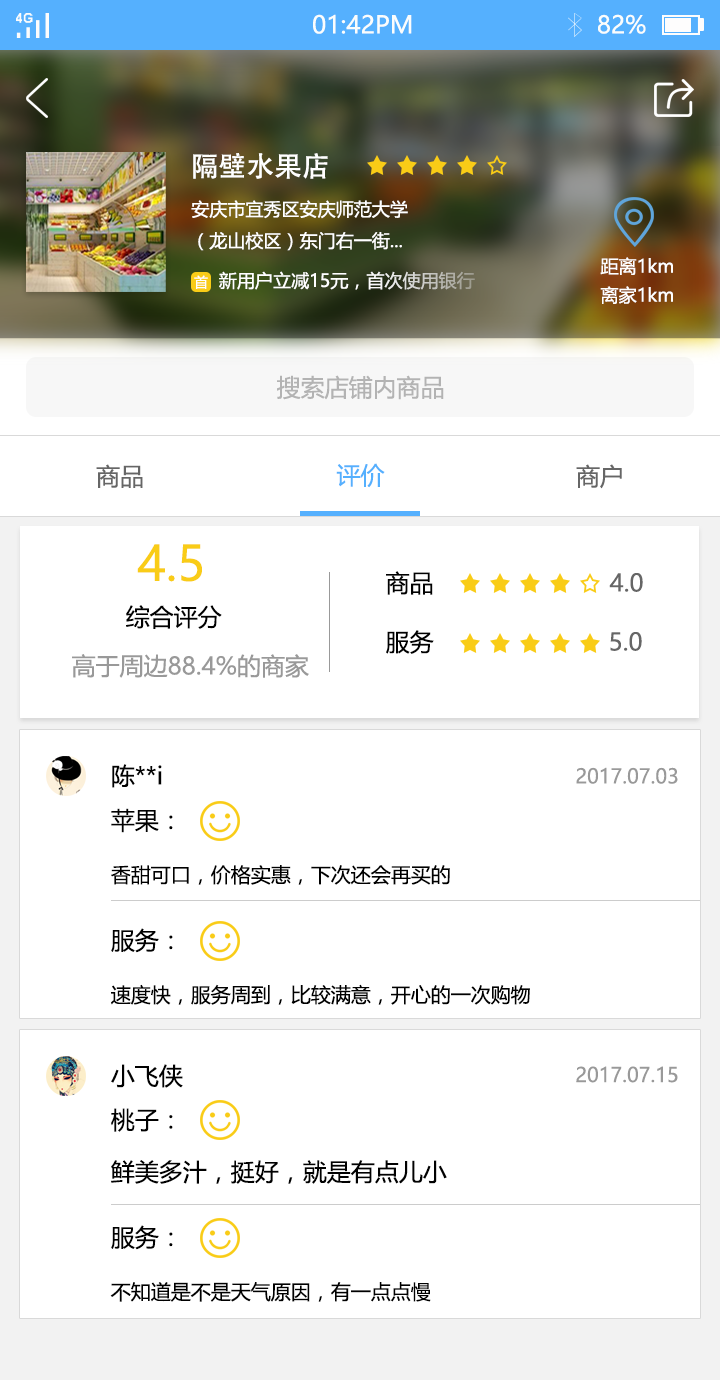
<style>
.page{position:relative;width:720px;height:1380px;background:#ffffff}
.page>*{position:absolute;margin:0}
.t1{font:24px "MicrosoftYaHei";color:#fbfdfc}
.t2{font:27.7px "AdobeHeitiStd-Regular";color:#ffffff}
.t3{font:18px "MicrosoftYaHei";color:#ffffff}
.t4{font:18.1px "MicrosoftYaHei";color:#ffffff}
.t5{font:13.8px "MicrosoftYaHei";color:#ffffff}
.t6{font:24px "MicrosoftYaHei";color:#b3b3b3}
.t7{font:24px "MicrosoftYaHei";color:#666666}
.t8{font:24px "MicrosoftYaHei";color:#55b0fe}
.t9{font:48px "MicrosoftYaHei";color:#f9cc17}
.t10{font:24px "MicrosoftYaHei";color:#010101}
.t11{font:24px "MicrosoftYaHei";color:#000000}
.t12{font:24px "MicrosoftYaHei";color:#999999}
.t13{font:20px "MicrosoftYaHei";color:#999999}
.t14{font:20px "MicrosoftYaHei";color:#000000}
</style>
<div class="page">
<p class="t1" style="left:313px;top:14px;width:99px;height:20px">01:42PM</p>
<p class="t1" style="left:598px;top:14px;width:48px;height:20px">82%</p>
<p class="t2" style="left:193px;top:153px;width:135px;height:26px">隔壁水果店</p>
<p class="t3" style="left:191px;top:200px;width:217px;height:51px">安庆市宜秀区安庆师范大学<br>（龙山校区）东门右一街...</p>
<p class="t4" style="left:600px;top:257px;width:73px;height:18px">距离1km</p>
<p class="t5" style="left:194px;top:275px;width:14px;height:14px">首</p>
<p class="t3" style="left:219px;top:271px;width:256px;height:19px">新用户立减15元，首次使用银行</p>
<p class="t4" style="left:600px;top:286px;width:73px;height:18px">离家1km</p>
<p class="t6" style="left:277px;top:375px;width:167px;height:25px">搜索店铺内商品</p>
<p class="t7" style="left:96px;top:464px;width:47px;height:24px">商品</p>
<p class="t8" style="left:336px;top:463px;width:49px;height:25px">评价</p>
<p class="t7" style="left:576px;top:464px;width:46px;height:25px">商户</p>
<p class="t9" style="left:137px;top:544px;width:65px;height:38px">4.5</p>
<p class="t10" style="left:386px;top:571px;width:47px;height:24px">商品</p>
<p class="t7" style="left:609px;top:573px;width:34px;height:19px">4.0</p>
<p class="t10" style="left:126px;top:605px;width:96px;height:24px">综合评分</p>
<p class="t11" style="left:386px;top:630px;width:48px;height:24px">服务</p>
<p class="t7" style="left:610px;top:632px;width:32px;height:19px">5.0</p>
<p class="t12" style="left:72px;top:654px;width:237px;height:24px">高于周边88.4%的商家</p>
<p class="t10" style="left:112px;top:764px;width:50px;height:24px">陈**i</p>
<p class="t13" style="left:576px;top:767px;width:102px;height:17px">2017.07.03</p>
<p class="t10" style="left:111px;top:808px;width:62px;height:25px">苹果：</p>
<p class="t14" style="left:111px;top:865px;width:339px;height:20px">香甜可口，价格实惠，下次还会再买的</p>
<p class="t10" style="left:111px;top:928px;width:62px;height:25px">服务：</p>
<p class="t14" style="left:111px;top:984px;width:419px;height:21px">速度快，服务周到，比较满意，开心的一次购物</p>
<p class="t10" style="left:111px;top:1064px;width:72px;height:24px">小飞侠</p>
<p class="t13" style="left:576px;top:1066px;width:102px;height:17px">2017.07.15</p>
<p class="t10" style="left:111px;top:1108px;width:62px;height:24px">桃子：</p>
<p class="t10" style="left:111px;top:1160px;width:336px;height:24px">鲜美多汁，挺好，就是有点儿小</p>
<p class="t10" style="left:111px;top:1225px;width:62px;height:25px">服务：</p>
<p class="t14" style="left:110px;top:1282px;width:321px;height:20px">不知道是不是天气原因，有一点点慢</p>
</div>
